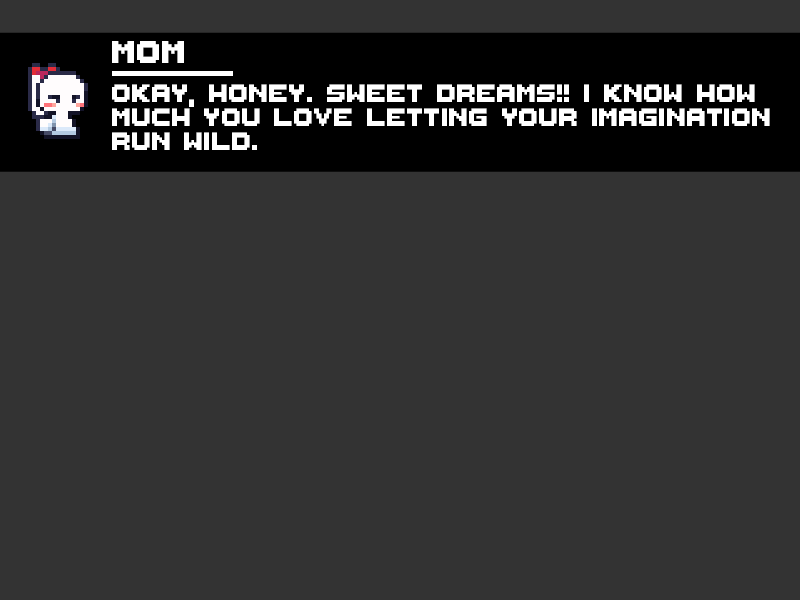
<style>
.page{position:relative;width:800px;height:600px;background:#333333}
.page>*{position:absolute;margin:0}
.t1{font:50px "ThaleahFat";color:#ffffff}
.t2{font:40px/24px "ThaleahFat";color:#ffffff}
</style>
<div class="page">
<p class="t1" style="left:112px;top:41px;width:72px;height:22px">Mom</p>
<p class="t2" style="left:112px;top:84px;width:658px;height:66px">Okay, Honey. Sweet dreams!! I know how<br>much you love letting your imagination<br>run wild.</p>
</div>
